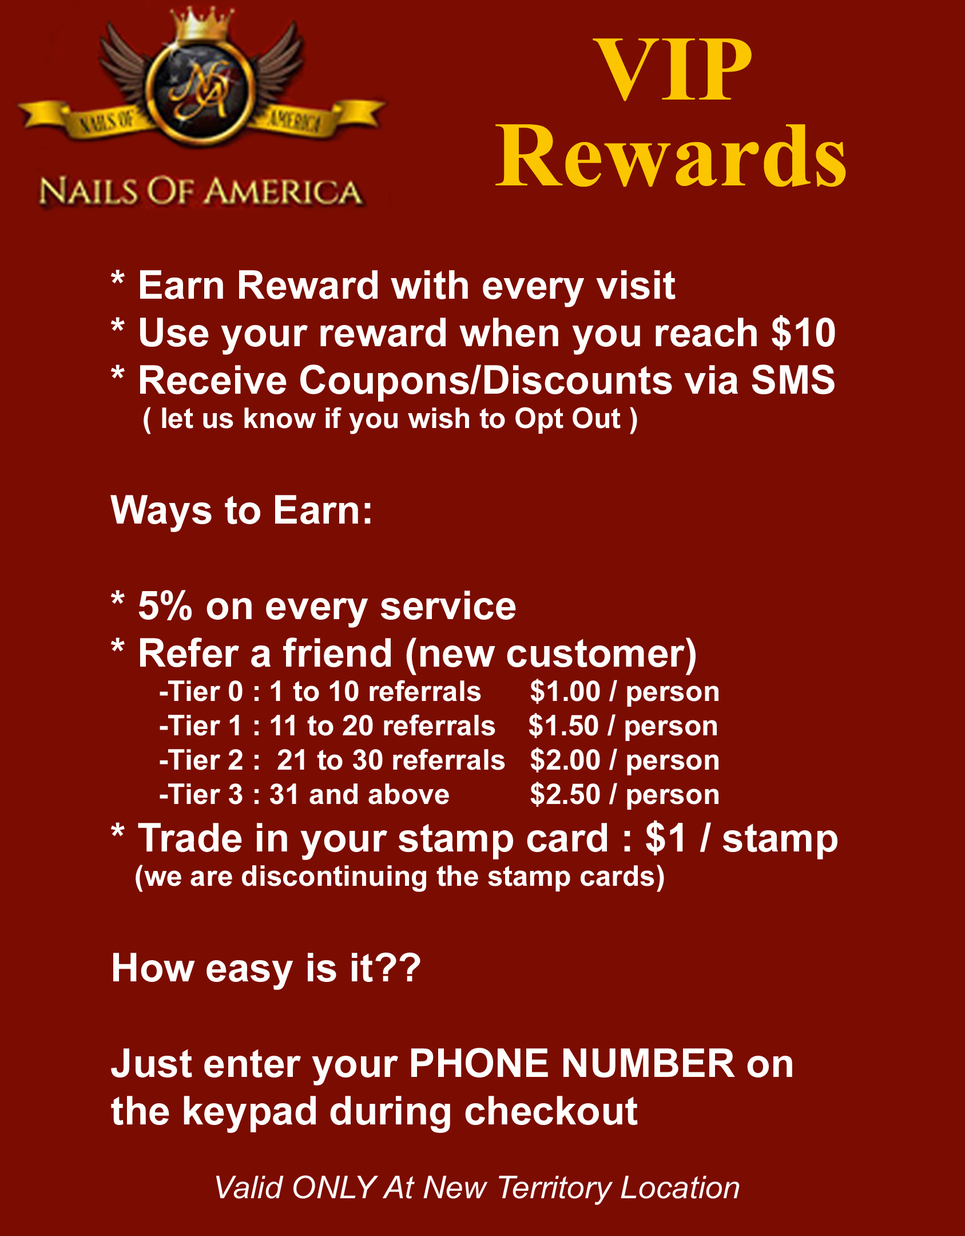
<style>
.page{position:relative;width:965px;height:1236px;background:#7b0c01}
.page>*{position:absolute;margin:0}
.t1{font:114.4px "Aparajita-Bold";color:#fbc600}
.t2{font:28.6px "Arial-BoldMT";color:#fefefc}
.t3{font:39.7px "Arial-BoldMT";color:#fefefc}
.t4{font:31.3px "Arial-ItalicMT";color:#fbf9f9}
</style>
<div class="page">
<p class="t1" style="left:593px;top:38px;width:159px;height:63px">VIP</p>
<p class="t1" style="left:495px;top:124px;width:351px;height:63px">Rewards</p>
<p class="t2" style="left:110px;top:269px;width:727px;height:864px"><span class="t3">* Earn Reward with every visit<br>* Use your reward when you reach $10<br>* Receive Coupons/Discounts via SMS <br></span>    ( let us know if you wish to Opt Out )<br><span class="t3"><br>Ways to Earn:<br><br>* 5% on every service<br>* Refer a friend (new customer) <br></span>      -Tier 0 : 1 to 10 referrals      $1.00 / person<br>      -Tier 1 : 11 to 20 referrals    $1.50 / person<br>      -Tier 2 :  21 to 30 referrals   $2.00 / person<br>      -Tier 3 : 31 and above          $2.50 / person<br><span class="t3">* Trade in your stamp card : $1 / stamp<br></span>   (we are discontinuing the stamp cards)<br><span class="t3"><br>How easy is it??  <br><br>Just enter your PHONE NUMBER on <br>the keypad during checkout</span></p>
<p class="t4" style="left:216px;top:1175px;width:524px;height:30px">Valid ONLY At New Territory Location</p>
</div>
